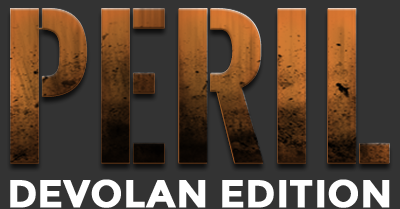
<style>
.page{position:relative;width:400px;height:209px;background:#333333}
.page>*{position:absolute;margin:0}
.t1{font:177px "OswaldStencil-Bold";font-weight:bold}
.t2{font:38.4px "Montserrat-Bold";color:#ffffff;font-weight:bold}
</style>
<div class="page">
<p class="t1" style="left:10px;top:8px;width:380px;height:156px">PERIL</p>
<p class="t2" style="left:10px;top:179px;width:380px;height:29px">DEVOLAN EDITION</p>
</div>
